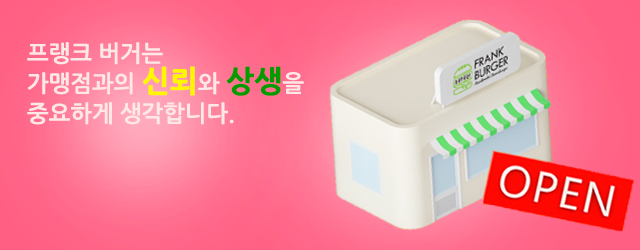
<style>
.page{position:relative;width:640px;height:250px}
.page>*{position:absolute;margin:0}
.t1{font:23px/30px "NanumGothicBold";color:#fee7e7}
.t2{font:30px/30px "NanumGothicExtraBold";color:#fff600}
.t3{font:30px/30px "NanumGothicExtraBold";color:#049a00}
</style>
<div class="page">
<p class="t1" style="left:27px;top:42px;width:277px;height:83px">프랭크 버거는 <br>가맹점과의 <span class="t2">신뢰</span>와 <span class="t3">상생</span>을 <br>중요하게 생각합니다.</p>
</div>
